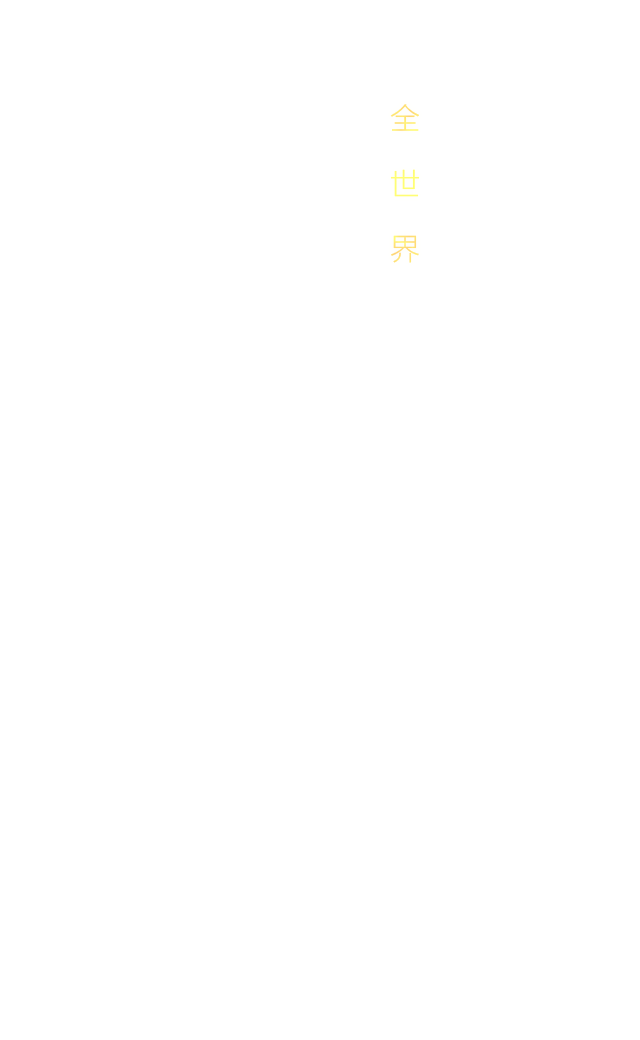
<style>
.page{position:relative;width:640px;height:1040px;background:#ffffff}
.page>*{position:absolute;margin:0}
.t1{font:30px/14.4px "FZLTXHJW--GB1-0";letter-spacing:0.2em;color:#ffef74;text-transform:uppercase}
</style>
<div class="page">
<p class="t1" style="left:390px;top:104px;width:30px;height:159px">全  世  界</p>
</div>
